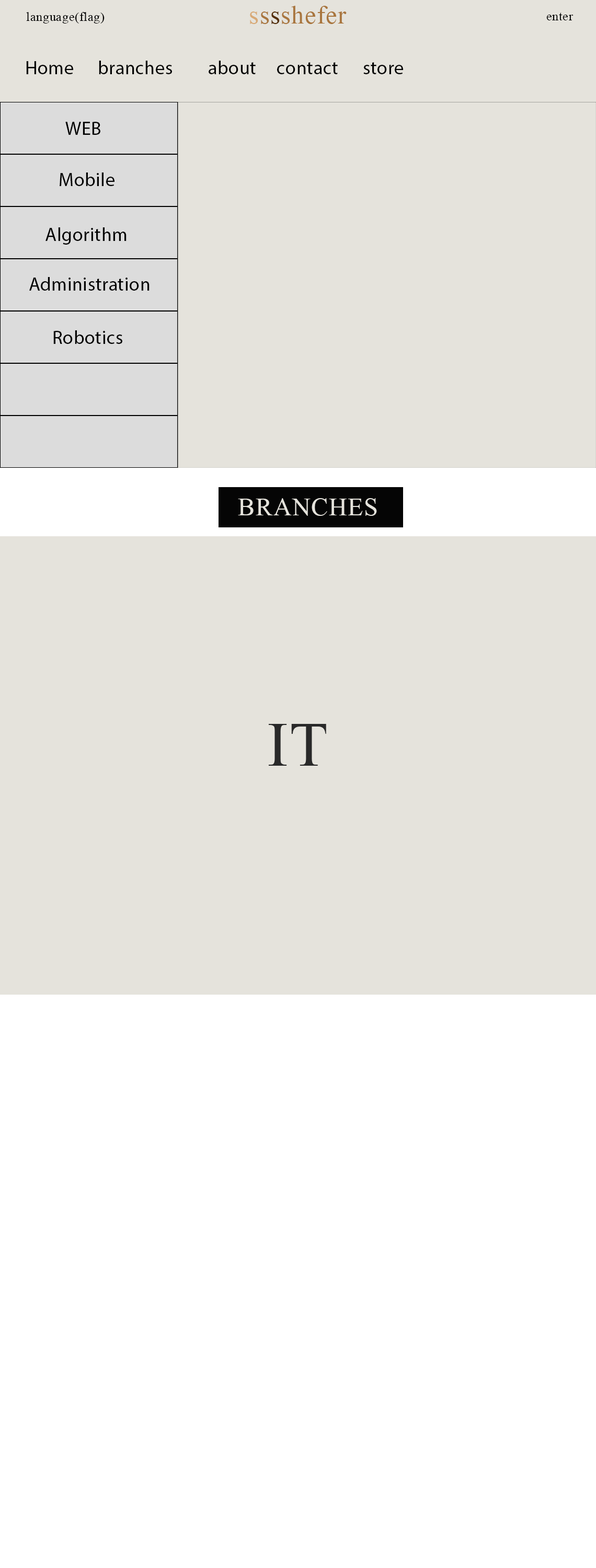
<style>
.page{position:relative;width:596px;height:1568px;background:#e5e3dc}
.page>*{position:absolute;margin:0}
.t1{font:37.6px "Microsoft-Himalaya";letter-spacing:0.02em;color:#a9763e}
.t2{font:37.6px "Microsoft-Himalaya";letter-spacing:0.02em;color:#d8a975}
.t3{font:37.6px "Microsoft-Himalaya";letter-spacing:0.02em;color:#552f07}
.t4{font:18.8px "Microsoft-Himalaya";letter-spacing:0.02em;color:#000000}
.t5{font:18.8px "MyriadPro-Regular";letter-spacing:0.02em;color:#000000}
.t6{font:37.6px "Microsoft-Himalaya";letter-spacing:0.02em;color:#e5e3dc}
.t7{font:94.3px "Microsoft-Himalaya";letter-spacing:0.02em;color:#292929}
</style>
<div class="page">
<p class="t1" style="left:250px;top:6px;width:97px;height:18px"><span class="t2">s</span>s<span class="t3">s</span>shefer</p>
<p class="t4" style="left:26px;top:12px;width:79px;height:12px">language(flag)</p>
<p class="t4" style="left:546px;top:13px;width:27px;height:7px">enter</p>
<p class="t5" style="left:26px;top:61px;width:47px;height:13px">Home</p>
<p class="t5" style="left:99px;top:61px;width:73px;height:13px">branches</p>
<p class="t5" style="left:209px;top:61px;width:47px;height:13px">about</p>
<p class="t5" style="left:277px;top:62px;width:61px;height:12px">contact</p>
<p class="t5" style="left:363px;top:62px;width:40px;height:12px">store</p>
<p class="t5" style="left:65px;top:122px;width:35px;height:13px">WEB</p>
<p class="t5" style="left:60px;top:172px;width:54px;height:14px">Mobile</p>
<p class="t5" style="left:45px;top:227px;width:81px;height:18px">Algorithm</p>
<p class="t5" style="left:29px;top:277px;width:120px;height:14px">Administration</p>
<p class="t5" style="left:53px;top:330px;width:69px;height:14px">Robotics</p>
<p class="t6" style="left:238px;top:498px;width:139px;height:18px">BRANCHES</p>
<p class="t7" style="left:268px;top:724px;width:58px;height:42px">IT</p>
</div>
